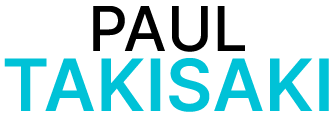
<style>
.page{position:relative;width:336px;height:117px;background:#ffffff}
.page>*{position:absolute;margin:0}
.t1{font:72px/60px "InterTight-SemiBold";letter-spacing:0.045em;color:#00c2d7}
.t2{font:62px/60px "InterTight-Medium";letter-spacing:0.045em;color:#000000}
</style>
<div class="page">
<p class="t1" style="left:4px;top:6px;width:325px;height:106px;text-align:center"><span class="t2">PAUL<br></span>TAKISAKI</p>
</div>
